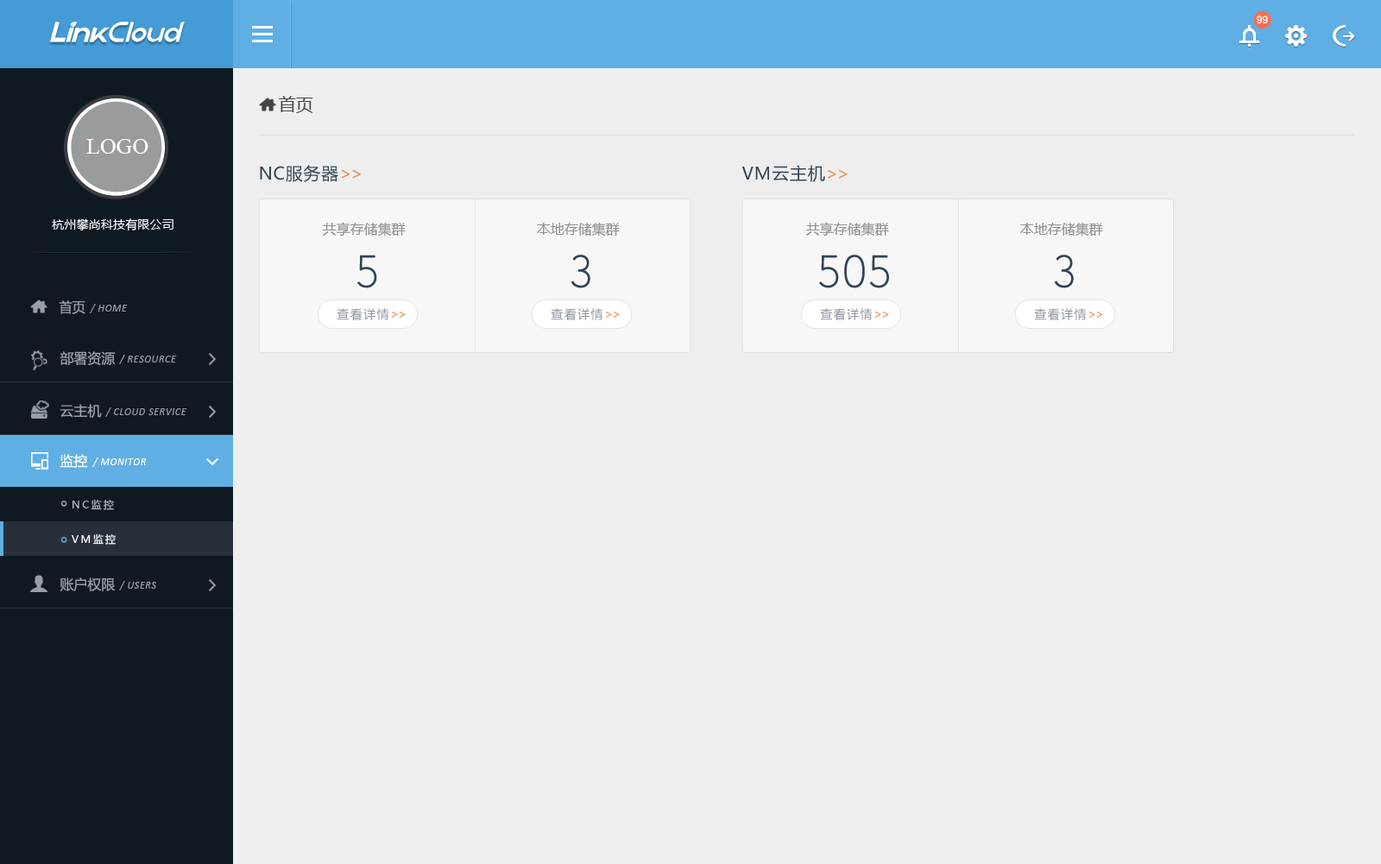
<style>
.page{position:relative;width:1381px;height:864px;background:#eeeeee}
.page>*{position:absolute;margin:0}
.t1{font:10.4px "ArialMT";color:#ffffff}
.t2{font:17.3px "MicrosoftYaHei";color:#444444}
.t3{font:22.4px "TimesNewRomanPSMT";color:#ffffff}
.t4{font:17.3px "MicrosoftYaHei";letter-spacing:0.04em;color:#334353}
.t5{font:17.3px "MicrosoftYaHei";letter-spacing:-0.1em;color:#ef8748}
.t6{font:12.1px "MicrosoftYaHei";letter-spacing:0.01em;color:#ffffff}
.t7{font:13.8px "MicrosoftYaHei";color:#8f8f8f}
.t8{font:43.1px "AvenirNextLTPro-UltLt";color:#334353;font-weight:bold}
.t9{font:13.8px "MicrosoftYaHei";color:#95a0aa;scale:0.96 1}
.t10{font:10.4px "Calibri-Italic";letter-spacing:0.05em;color:#95a0aa}
.t11{font:12.1px "MicrosoftYaHei";letter-spacing:0.1em;color:#9097a1}
.t12{font:12.1px "MicrosoftYaHei";letter-spacing:-0.1em;color:#ef8748}
.t13{font:13.8px "MicrosoftYaHei";color:#95a0aa}
.t14{font:10.4px "Calibri-Italic";letter-spacing:0.05em;color:#95a0aa;text-transform:uppercase}
.t15{font:13.8px "MicrosoftYaHei";color:#ffffff}
.t16{font:10.4px "Calibri-Italic";letter-spacing:0.05em;color:#ffffff;text-transform:uppercase}
.t17{font:10.4px "Calibri-Italic";letter-spacing:0.05em;color:#ffffff}
.t18{font:10.4px/34.5px "MicrosoftYaHei";letter-spacing:0.2em;color:#b0bdc4}
.t19{font:10.4px/34.5px "MicrosoftYaHei";letter-spacing:0.2em;color:#ffffff}
</style>
<div class="page">
<p class="t1" style="left:1256px;top:16px;width:12px;height:8px">99</p>
<p class="t2" style="left:279px;top:96px;width:34px;height:17px">首页</p>
<p class="t3" style="left:86px;top:139px;width:62px;height:15px">LOGO</p>
<p class="t4" style="left:260px;top:165px;width:101px;height:17px">NC服务器<span class="t5">&gt;&gt;</span></p>
<p class="t4" style="left:741px;top:165px;width:106px;height:17px">VM云主机<span class="t5">&gt;&gt;</span></p>
<p class="t6" style="left:52px;top:218px;width:121px;height:13px">杭州攀尚科技有限公司</p>
<p class="t7" style="left:323px;top:222px;width:83px;height:14px">共享存储集群</p>
<p class="t7" style="left:537px;top:222px;width:83px;height:14px">本地存储集群</p>
<p class="t7" style="left:806px;top:222px;width:83px;height:14px">共享存储集群</p>
<p class="t7" style="left:1020px;top:222px;width:83px;height:14px">本地存储集群</p>
<p class="t8" style="left:357px;top:255px;width:20px;height:33px">5</p>
<p class="t8" style="left:571px;top:255px;width:19px;height:33px">3</p>
<p class="t8" style="left:819px;top:255px;width:70px;height:33px">505</p>
<p class="t8" style="left:1054px;top:255px;width:19px;height:33px">3</p>
<p class="t9" style="left:59px;top:300px;width:26px;height:14px">首页</p>
<p class="t10" style="left:90px;top:304px;width:38px;height:9px">/ HOME</p>
<p class="t11" style="left:337px;top:308px;width:69px;height:12px">查看详情<span class="t12">&gt;&gt;</span></p>
<p class="t11" style="left:551px;top:308px;width:69px;height:12px">查看详情<span class="t12">&gt;&gt;</span></p>
<p class="t11" style="left:820px;top:308px;width:69px;height:12px">查看详情<span class="t12">&gt;&gt;</span></p>
<p class="t11" style="left:1034px;top:308px;width:69px;height:12px">查看详情<span class="t12">&gt;&gt;</span></p>
<p class="t13" style="left:60px;top:351px;width:56px;height:14px">部署资源</p>
<p class="t14" style="left:119px;top:355px;width:58px;height:9px"><span class="t10">/ </span>resource</p>
<p class="t13" style="left:60px;top:404px;width:42px;height:14px">云主机</p>
<p class="t14" style="left:105px;top:407px;width:81px;height:10px"><span class="t10">/ </span>cloud service</p>
<p class="t15" style="left:60px;top:454px;width:28px;height:14px">监控</p>
<p class="t16" style="left:92px;top:457px;width:55px;height:10px"><span class="t17">/ </span>monitor</p>
<p class="t18" style="left:72px;top:499px;width:44px;height:45px">NC监控<br><span class="t19">VM监控<br></span>基础资源</p>
<p class="t13" style="left:60px;top:577px;width:56px;height:14px">账户权限</p>
<p class="t14" style="left:119px;top:581px;width:37px;height:9px"><span class="t10">/ </span>users</p>
</div>
